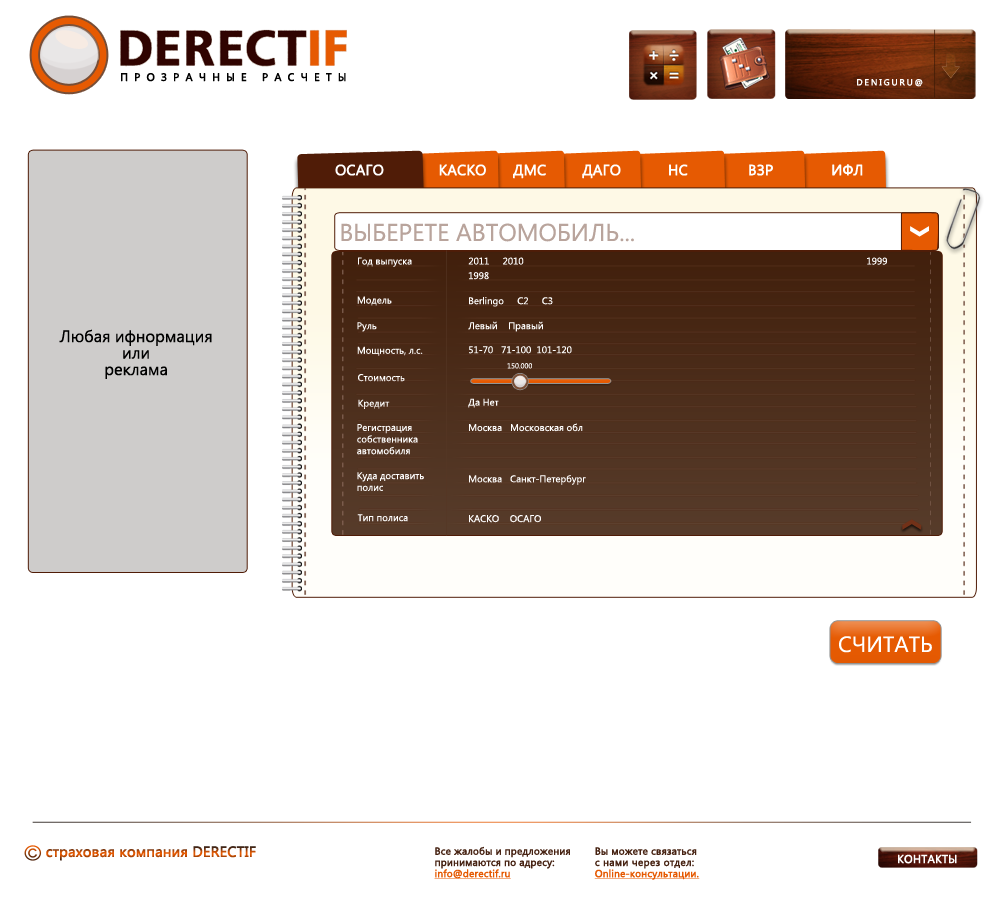
<style>
.page{position:relative;width:1000px;height:906px;background:#ffffff}
.page>*{position:absolute;margin:0}
.t1{font:10.8px "SegoeUI";letter-spacing:0.56em;color:#000000;font-weight:bold}
.t2{font:8.7px "SegoeUI";letter-spacing:0.2em;color:#ffffff;font-weight:bold}
.t3{font:14.6px "SegoeUI";letter-spacing:-0.005em;color:#ffffff;font-weight:bold}
.t4{font:24.3px "SegoeUI";color:#b9a49c}
.t5{font:9.7px "SegoeUI";color:#ffffff}
.t6{font:9.7px/14.6px "SegoeUI";color:#ffffff}
.t7{font:16.5px/16.5px "SegoeUI";color:#000000}
.t8{font:7.3px "SegoeUI";color:#f4f2f1}
.t9{font:22px "SegoeUI";color:#ffffff}
.t10{font:14.6px "SegoeUI";letter-spacing:-0.005em;font-weight:bold}
.t11{font:10.1px/11.2px "SegoeUI";letter-spacing:-0.005em;color:#472313;font-weight:bold}
.t12{font:10.1px/11.2px "SegoeUI";letter-spacing:-0.005em;color:#e65a02;font-weight:bold;text-decoration:underline}
.t13{font:10.1px/11.2px "SegoeUI";letter-spacing:0.01em;color:#472313;font-weight:bold}
.t14{font:11.3px "SegoeUI";color:#ffffff;font-weight:bold}
</style>
<div class="page">
<p class="t1" style="left:121px;top:73px;width:225px;height:9px">ПРОЗРАЧНЫЕ РАСЧЕТЫ</p>
<p class="t2" style="left:857px;top:79px;width:66px;height:8px">DENIGURU@</p>
<p class="t3" style="left:335px;top:164px;width:49px;height:12px">ОСАГО</p>
<p class="t3" style="left:439px;top:164px;width:47px;height:12px">КАСКО</p>
<p class="t3" style="left:513px;top:164px;width:33px;height:15px">ДМС</p>
<p class="t3" style="left:582px;top:164px;width:39px;height:15px">ДАГО</p>
<p class="t3" style="left:669px;top:164px;width:19px;height:12px">НС</p>
<p class="t3" style="left:749px;top:164px;width:24px;height:12px">ВЗР</p>
<p class="t3" style="left:832px;top:164px;width:31px;height:12px">ИФЛ</p>
<p class="t4" style="left:341px;top:223px;width:293px;height:19px">ВЫБЕРЕТЕ АВТОМОБИЛЬ...</p>
<p class="t5" style="left:358px;top:257px;width:54px;height:10px">Год выпуска</p>
<p class="t6" style="left:468px;top:257px;width:56px;height:23px;text-align:center">2011     2010<br>1998</p>
<p class="t5" style="left:867px;top:257px;width:20px;height:8px">1999</p>
<p class="t5" style="left:357px;top:296px;width:35px;height:10px">Модель</p>
<p class="t5" style="left:469px;top:297px;width:84px;height:10px">Berlingo     C2     C3</p>
<p class="t7" style="left:59px;top:329px;width:153px;height:50px;text-align:center">Любая ифнормация<br>или<br>реклама</p>
<p class="t5" style="left:357px;top:322px;width:20px;height:10px">Руль</p>
<p class="t5" style="left:468px;top:321px;width:75px;height:11px">Левый    Правый</p>
<p class="t5" style="left:357px;top:346px;width:66px;height:10px">Мощность, л.с.</p>
<p class="t5" style="left:469px;top:346px;width:103px;height:8px">51-70   71-100  101-120</p>
<p class="t8" style="left:507px;top:363px;width:25px;height:6px">150.000</p>
<p class="t5" style="left:358px;top:374px;width:47px;height:8px">Стоимость</p>
<p class="t5" style="left:358px;top:399px;width:32px;height:10px">Кредит</p>
<p class="t5" style="left:468px;top:398px;width:31px;height:10px">Да Нет</p>
<p class="t5" style="left:357px;top:424px;width:61px;height:31px">Регистрация<br>собственника<br>автомобиля</p>
<p class="t5" style="left:469px;top:423px;width:114px;height:9px">Москва   Московская обл</p>
<p class="t5" style="left:357px;top:472px;width:67px;height:19px">Куда доставить<br>полис</p>
<p class="t5" style="left:469px;top:475px;width:117px;height:10px">Москва   Санкт-Петербург</p>
<p class="t5" style="left:357px;top:514px;width:51px;height:8px">Тип полиса</p>
<p class="t5" style="left:469px;top:515px;width:72px;height:8px">КАСКО    ОСАГО</p>
<p class="t9" style="left:839px;top:636px;width:93px;height:17px">СЧИТАТЬ</p>
<p class="t10" style="left:46px;top:846px;width:210px;height:15px">страховая компания DERECTIF</p>
<p class="t11" style="left:434px;top:846px;width:136px;height:33px">Все жалобы и предложения<br>принимаются по адресу:<br><span class="t12">info@derectif.ru</span></p>
<p class="t12" style="left:594px;top:847px;width:106px;height:33px"><span class="t11">Вы можете связаться<br></span><span class="t13">с нами через отдел:<br></span>Online-консультации.</p>
<p class="t14" style="left:898px;top:854px;width:59px;height:10px">КОНТАКТЫ</p>
</div>
